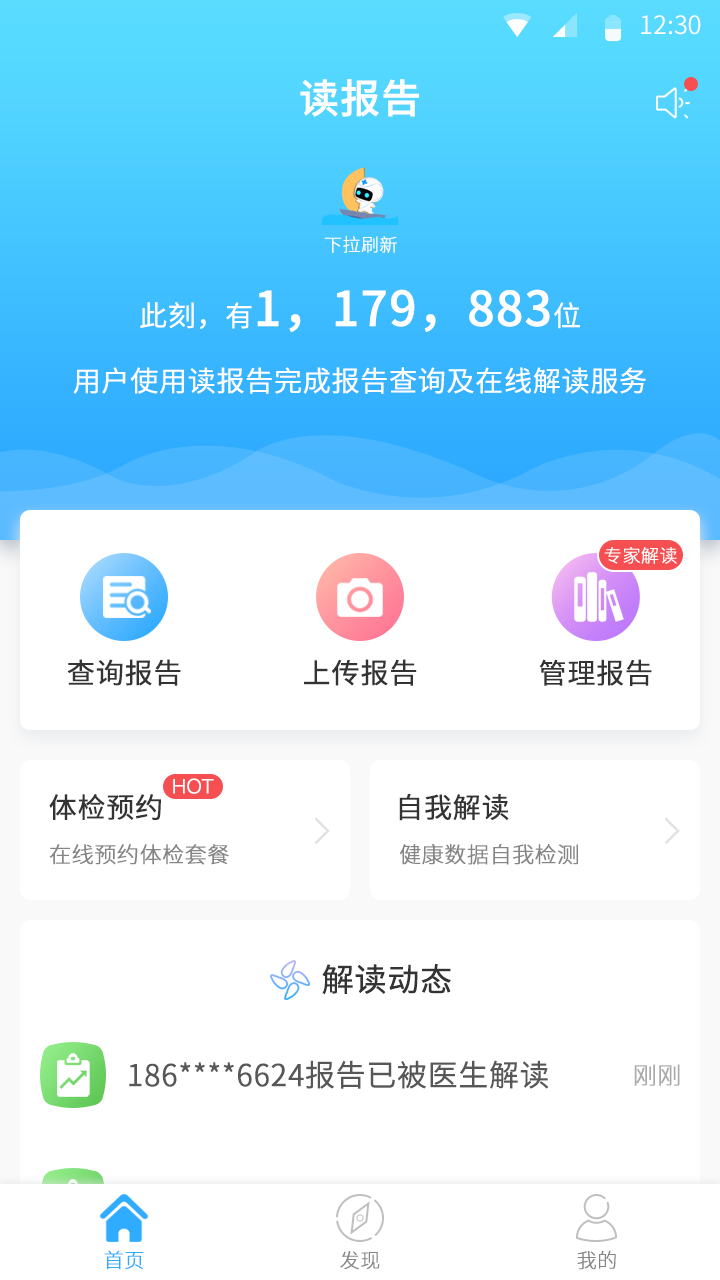
<style>
.page{position:relative;width:720px;height:1280px;background:#ffffff}
.page>*{position:absolute;margin:0}
.t1{font:25.4px "SourceHanSansCN-Normal";color:#ffffff}
.t2{font:40px "SourceHanSansCN-Medium";color:#ffffff;font-weight:bold}
.t3{font:18px "SourceHanSansCN-Light";color:#ffffff;font-weight:bold}
.t4{font:48px "SourceHanSansCN-Medium";color:#ffffff;font-weight:bold}
.t5{font:28px "SourceHanSansCN-Normal";color:#ffffff;font-weight:bold}
.t6{font:28px "SourceHanSansCN-Regular";color:#333333;font-weight:bold}
.t7{font:20px "HelveticaNeue-Light";color:#ffffff;font-weight:bold}
.t8{font:22px "SourceHanSansCN-Light";color:#858585;font-weight:bold}
.t9{font:32px "SourceHanSansCN-Regular";color:#333333;font-weight:bold}
.t10{font:30px "SourceHanSansCN-Normal";color:#575757;font-weight:bold}
.t11{font:24px "SourceHanSansCN-Light";color:#ababab;font-weight:bold}
.t12{font:20px "SourceHanSansCN-Light";color:#30acff;font-weight:bold}
.t13{font:20px "SourceHanSansCN-Light";color:#858585;font-weight:bold}
</style>
<div class="page">
<p class="t1" style="left:641px;top:15px;width:60px;height:20px">12:30</p>
<p class="t2" style="left:300px;top:79px;width:119px;height:38px">读报告</p>
<p class="t3" style="left:324px;top:236px;width:73px;height:17px">下拉刷新</p>
<p class="t4" style="left:140px;top:289px;width:440px;height:43px"><span class="t5">此刻，有</span>1，179，883<span class="t5">位</span></p>
<p class="t5" style="left:73px;top:367px;width:573px;height:27px">用户使用读报告完成报告查询及在线解读服务</p>
<p class="t3" style="left:604px;top:547px;width:73px;height:17px">专家解读</p>
<p class="t6" style="left:67px;top:659px;width:114px;height:27px">查询报告</p>
<p class="t6" style="left:304px;top:659px;width:113px;height:27px">上传报告</p>
<p class="t6" style="left:539px;top:659px;width:113px;height:27px">管理报告</p>
<p class="t7" style="left:173px;top:778px;width:41px;height:16px">HOT</p>
<p class="t6" style="left:49px;top:794px;width:112px;height:26px">体检预约</p>
<p class="t6" style="left:399px;top:793px;width:110px;height:28px">自我解读</p>
<p class="t8" style="left:49px;top:844px;width:180px;height:21px">在线预约体检套餐</p>
<p class="t8" style="left:400px;top:844px;width:178px;height:21px">健康数据自我检测</p>
<p class="t9" style="left:322px;top:964px;width:129px;height:31px">解读动态</p>
<p class="t10" style="left:129px;top:1060px;width:420px;height:29px">186****6624报告已被医生解读</p>
<p class="t11" style="left:634px;top:1064px;width:46px;height:22px">刚刚</p>
<p class="t12" style="left:104px;top:1250px;width:40px;height:20px">首页</p>
<p class="t13" style="left:340px;top:1251px;width:40px;height:19px">发现</p>
<p class="t13" style="left:577px;top:1250px;width:39px;height:20px">我的</p>
</div>
